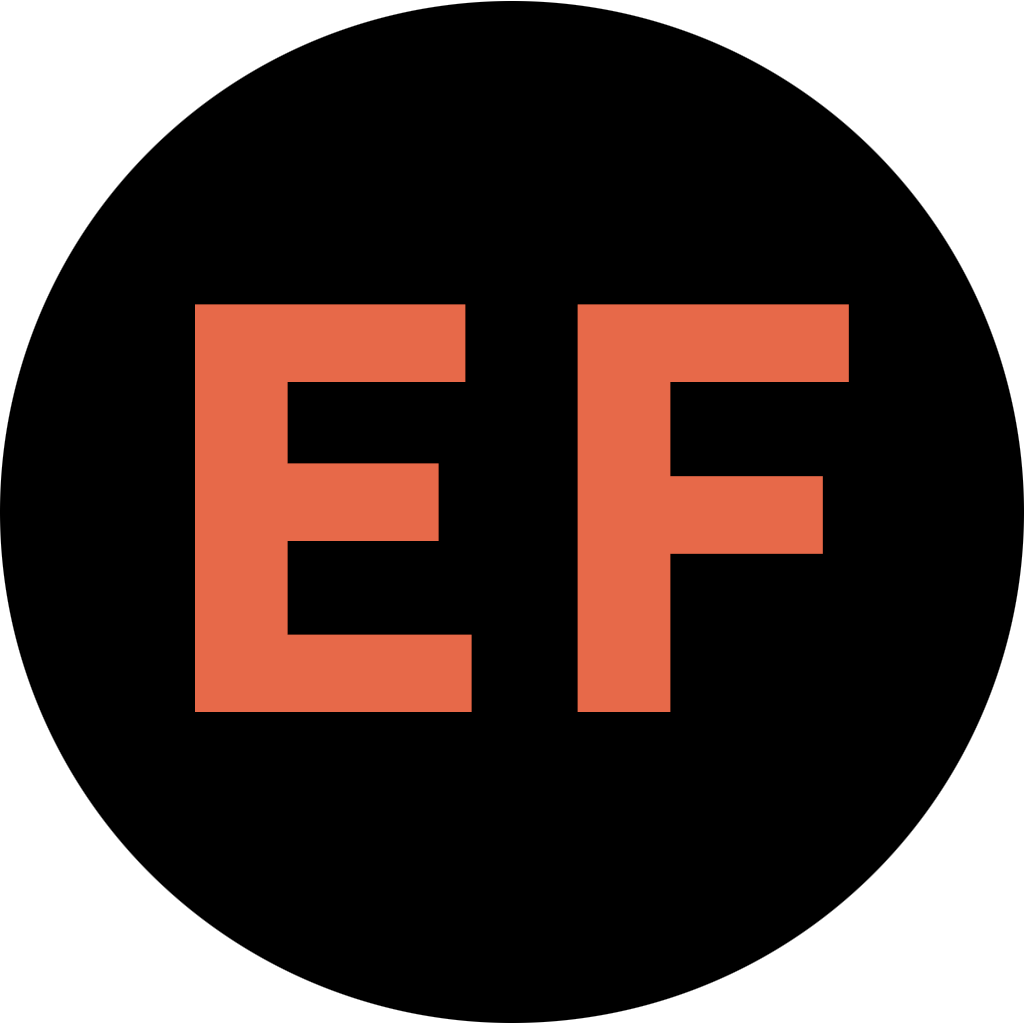
<style>
.page{position:relative;width:1024px;height:1024px;background:#000000}
.page>*{position:absolute;margin:0}
.t1{font:625px "SourceCodePro-Bold";color:#e76949}
</style>
<div class="page">
<p class="t1" style="left:195px;top:304px;width:654px;height:408px">EF</p>
</div>
